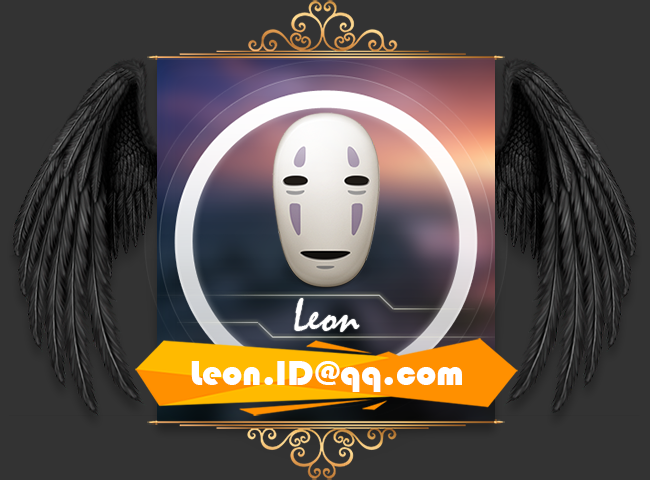
<style>
.page{position:relative;width:650px;height:480px;background:#333333}
.page>*{position:absolute;margin:0}
.t1{font:48px "Mistral";color:#ffffff}
.t2{font:36px "Bauhaus93";color:#ffffff}
</style>
<div class="page">
<p class="t1" style="left:294px;top:298px;width:66px;height:34px">Leon</p>
<p class="t2" style="left:191px;top:361px;width:271px;height:31px">Leon.ID@qq.com</p>
</div>
